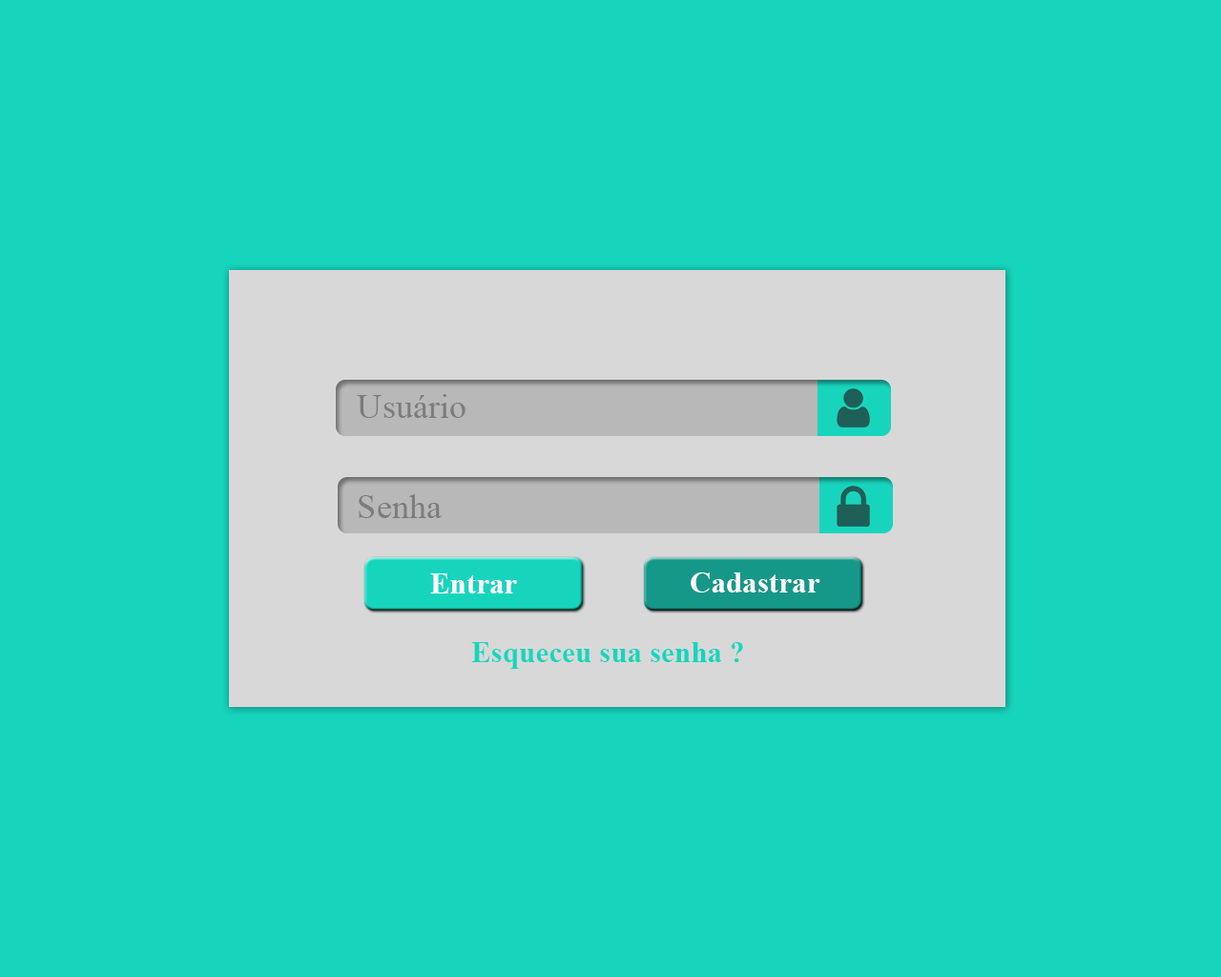
<style>
.page{position:relative;width:1221px;height:977px;background:#17d5bd}
.page>*{position:absolute;margin:0}
.t1{font:34.7px "TimesNewRomanPSMT";color:#7c7c7c}
.t2{font:29.7px "TimesNewRomanPS-BoldMT";color:#ffffff}
.t3{font:29.7px "TimesNewRomanPS-BoldMT";color:#17d5bd}
</style>
<div class="page">
<p class="t1" style="left:357px;top:394px;width:108px;height:24px">Usuário</p>
<p class="t1" style="left:359px;top:494px;width:83px;height:24px">Senha</p>
<p class="t2" style="left:430px;top:573px;width:87px;height:20px">Entrar</p>
<p class="t2" style="left:691px;top:572px;width:129px;height:20px">Cadastrar</p>
<p class="t3" style="left:471px;top:642px;width:272px;height:27px">Esqueceu sua senha ?</p>
</div>
